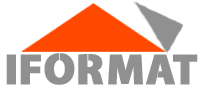
<style>
.page{position:relative;width:200px;height:90px;background:#ffffff}
.page>*{position:absolute;margin:0}
.t1{font:43.8px "Cleanvertising-Black";color:#919090;font-weight:bold}
</style>
<div class="page">
<p class="t1" style="left:6px;top:53px;width:192px;height:32px">IFORMAT</p>
</div>
